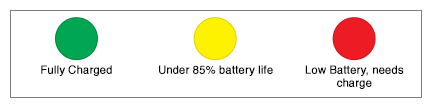
<style>
.page{position:relative;width:432px;height:108px;background:#ffffff}
.page>*{position:absolute;margin:0}
.t1{font:11px "Helvetica";color:#000000;font-weight:bold}
</style>
<div class="page">
<p class="t1" style="left:41px;top:65px;width:71px;height:11px">Fully Charged</p>
<p class="t1" style="left:159px;top:65px;width:114px;height:11px">Under 85% battery life</p>
<p class="t1" style="left:305px;top:65px;width:99px;height:24px;text-align:center">Low Battery, needs <br>charge</p>
</div>
